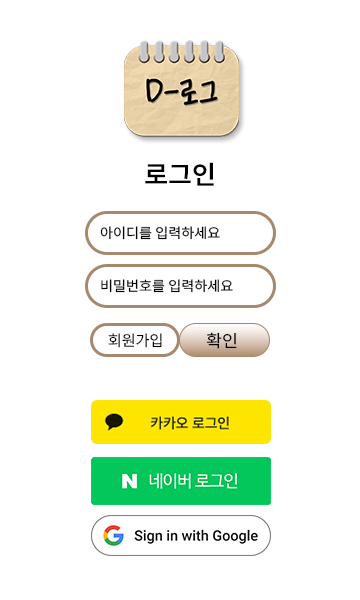
<style>
.page{position:relative;width:360px;height:600px;background:#ffffff}
.page>*{position:absolute;margin:0}
.t1{font:25.4px "NotoSansKR-SemiBold";color:#000000}
.t2{font:13.9px "NotoSansKR-Regular";color:#000000}
.t3{font:15px "NotoSansKR-Regular";color:#000000}
.t4{font:17px "NotoSansKR-Regular";color:#000000}
</style>
<div class="page">
<p class="t1" style="left:145px;top:162px;width:69px;height:24px">로그인</p>
<p class="t2" style="left:100px;top:226px;width:120px;height:14px">아이디를 입력하세요</p>
<p class="t2" style="left:101px;top:279px;width:132px;height:14px">비밀번호를 입력하세요</p>
<p class="t3" style="left:108px;top:333px;width:54px;height:15px">회원가입</p>
<p class="t4" style="left:206px;top:332px;width:31px;height:17px">확인</p>
</div>
